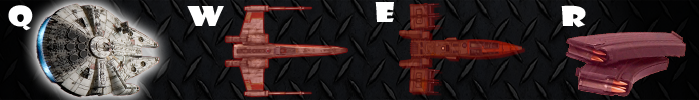
<style>
.page{position:relative;width:699px;height:100px}
.page>*{position:absolute;margin:0}
.t1{font:26.4px "ShowcardGothic-Reg";color:#ffffff;scale:1.36 1}
</style>
<div class="page">
<p class="t1" style="left:8px;top:5px;width:25px;height:26px">Q</p>
<p class="t1" style="left:187px;top:6px;width:37px;height:20px">W</p>
<p class="t1" style="left:375px;top:2px;width:19px;height:20px">E</p>
<p class="t1" style="left:561px;top:5px;width:25px;height:23px">R</p>
</div>
